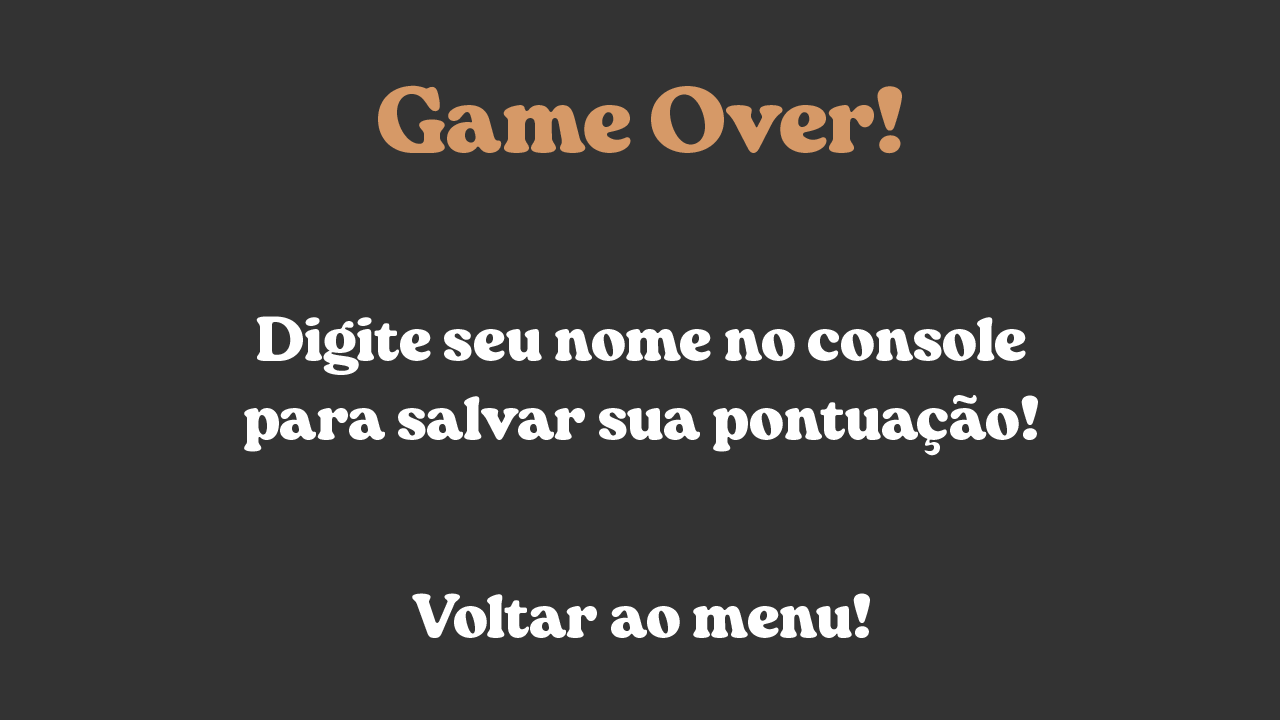
<style>
.page{position:relative;width:1280px;height:720px;background:#333333}
.page>*{position:absolute;margin:0}
.t1{font:100px "Manchego-Black";color:#d69967}
.t2{font:66.7px "Manchego-Black";color:#ffffff}
</style>
<div class="page">
<p class="t1" style="left:378px;top:85px;width:524px;height:69px">Game Over!</p>
<p class="t2" style="left:244px;top:316px;width:794px;height:140px;text-align:center">Digite seu nome no console<br>para salvar sua pontuação!</p>
<p class="t2" style="left:412px;top:593px;width:458px;height:45px">Voltar ao menu!</p>
</div>
